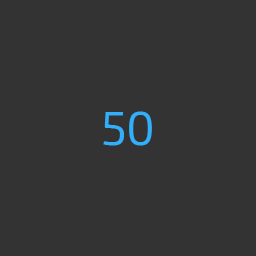
<style>
.page{position:relative;width:256px;height:256px;background:#333333}
.page>*{position:absolute;margin:0}
.t1{font:48px "Exo2-Regular";color:#32affa}
</style>
<div class="page">
<p class="t1" style="left:103px;top:111px;width:49px;height:35px">50</p>
</div>
